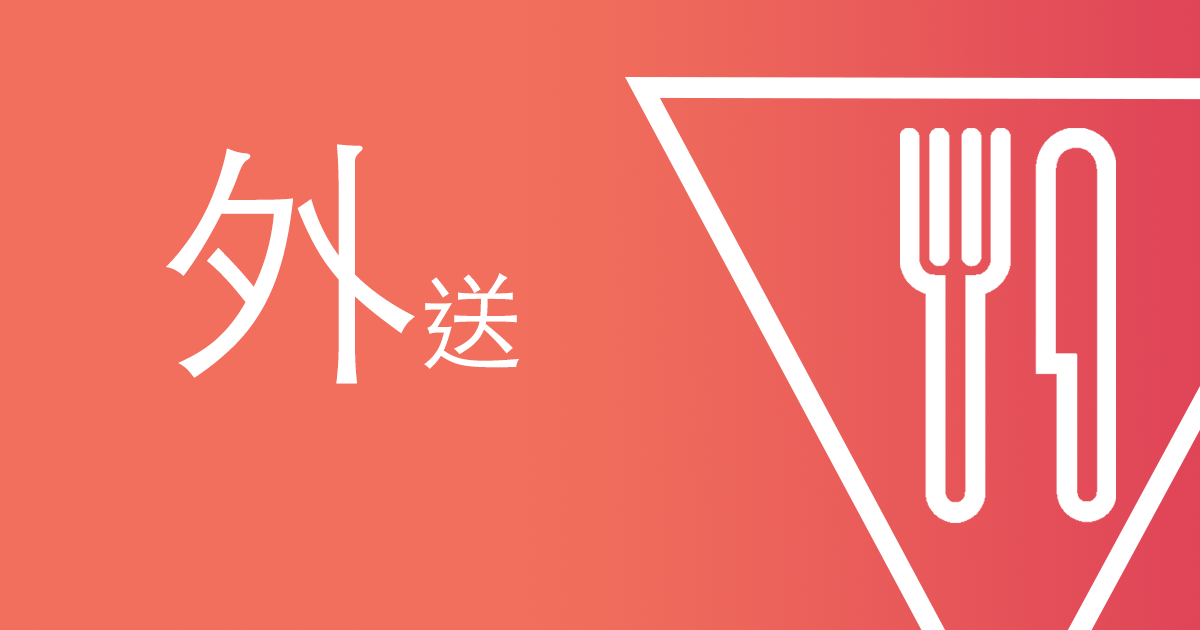
<style>
.page{position:relative;width:1200px;height:630px;background:#f16f5c}
.page>*{position:absolute;margin:0}
.t1{font:266.7px "STHeitiTC-Light";letter-spacing:-0.02em;color:#ffffff}
.t2{font:106.7px "STHeitiTC-Light";letter-spacing:-0.02em;color:#ffffff}
</style>
<div class="page">
<p class="t1" style="left:166px;top:144px;width:353px;height:240px">外<span class="t2">送</span></p>
</div>
